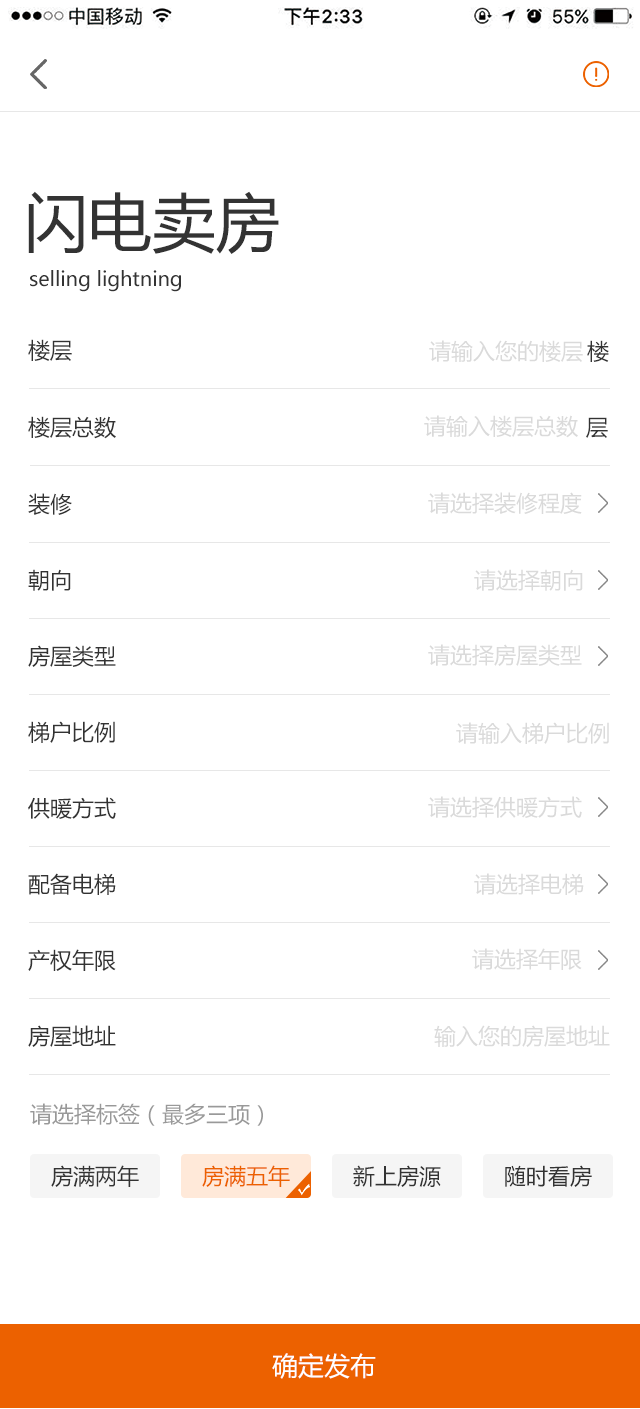
<style>
.page{position:relative;width:640px;height:1409px;background:#ffffff}
.page>*{position:absolute;margin:0}
.t1{font:64px "MicrosoftYaHei";color:#333333}
.t2{font:20px "MicrosoftYaHei";color:#333333}
.t3{font:22px "MicrosoftYaHei";color:#333333}
.t4{font:22px "MicrosoftYaHei";color:#dadada}
.t5{font:22px "MicrosoftYaHei";color:#999999}
.t6{font:22px "MicrosoftYaHei";color:#ec6100}
.t7{font:26px "MicrosoftYaHei";color:#ffffff}
</style>
<div class="page">
<p class="t1" style="left:28px;top:191px;width:251px;height:63px">闪电卖房</p>
<p class="t2" style="left:30px;top:270px;width:151px;height:22px">selling lightning</p>
<p class="t3" style="left:28px;top:339px;width:44px;height:22px">楼层</p>
<p class="t4" style="left:429px;top:340px;width:154px;height:22px">请输入您的楼层</p>
<p class="t3" style="left:587px;top:340px;width:22px;height:22px">楼</p>
<p class="t3" style="left:28px;top:416px;width:88px;height:23px">楼层总数</p>
<p class="t4" style="left:424px;top:415px;width:154px;height:23px">请输入楼层总数</p>
<p class="t3" style="left:586px;top:417px;width:22px;height:21px">层</p>
<p class="t3" style="left:28px;top:493px;width:44px;height:22px">装修</p>
<p class="t4" style="left:428px;top:492px;width:154px;height:22px">请选择装修程度</p>
<p class="t3" style="left:28px;top:569px;width:43px;height:22px">朝向</p>
<p class="t4" style="left:474px;top:569px;width:109px;height:22px">请选择朝向</p>
<p class="t3" style="left:28px;top:645px;width:88px;height:22px">房屋类型</p>
<p class="t4" style="left:428px;top:644px;width:154px;height:22px">请选择房屋类型</p>
<p class="t3" style="left:28px;top:721px;width:87px;height:22px">梯户比例</p>
<p class="t4" style="left:456px;top:722px;width:153px;height:22px">请输入梯户比例</p>
<p class="t3" style="left:28px;top:797px;width:88px;height:22px">供暖方式</p>
<p class="t4" style="left:428px;top:796px;width:154px;height:22px">请选择供暖方式</p>
<p class="t3" style="left:28px;top:873px;width:88px;height:22px">配备电梯</p>
<p class="t4" style="left:474px;top:873px;width:110px;height:22px">请选择电梯</p>
<p class="t3" style="left:28px;top:949px;width:88px;height:22px">产权年限</p>
<p class="t4" style="left:472px;top:948px;width:110px;height:22px">请选择年限</p>
<p class="t3" style="left:28px;top:1025px;width:88px;height:22px">房屋地址</p>
<p class="t4" style="left:434px;top:1025px;width:176px;height:22px">输入您的房屋地址</p>
<p class="t5" style="left:30px;top:1103px;width:233px;height:23px">请选择标签（最多三项）</p>
<p class="t3" style="left:51px;top:1165px;width:88px;height:22px">房满两年</p>
<p class="t6" style="left:202px;top:1165px;width:88px;height:22px">房满五年</p>
<p class="t3" style="left:353px;top:1165px;width:88px;height:22px">新上房源</p>
<p class="t3" style="left:505px;top:1165px;width:87px;height:22px">随时看房</p>
<p class="t7" style="left:272px;top:1353px;width:104px;height:26px">确定发布</p>
</div>
